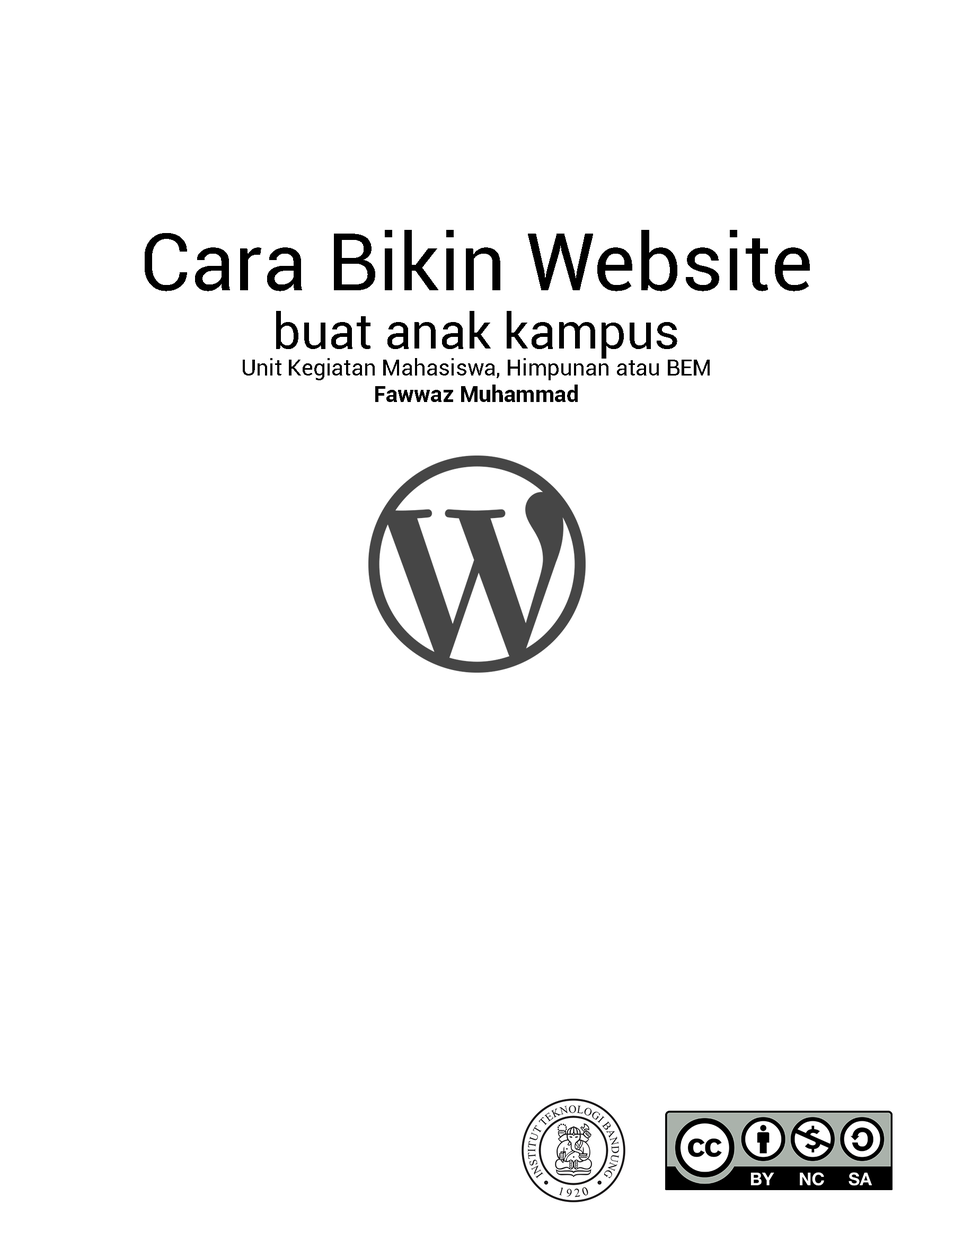
<style>
.page{position:relative;width:954px;height:1250px;background:#ffffff}
.page>*{position:absolute;margin:0}
.t1{font:22.1px "Roboto-Regular";letter-spacing:0.005em;color:#000000}
.t2{font:79.6px "Roboto-Regular";letter-spacing:0.005em;color:#000000}
.t3{font:48.6px "Roboto-Regular";letter-spacing:0.005em;color:#000000}
.t4{font:22.1px "Roboto-Bold";letter-spacing:0.005em;color:#000000}
</style>
<div class="page">
<p class="t1" style="left:145px;top:230px;width:665px;height:172px;text-align:center"><span class="t2">Cara Bikin Website<br></span><span class="t3">buat anak kampus<br></span>Unit Kegiatan Mahasiswa, Himpunan atau BEM<br><span class="t4">Fawwaz Muhammad</span></p>
</div>
